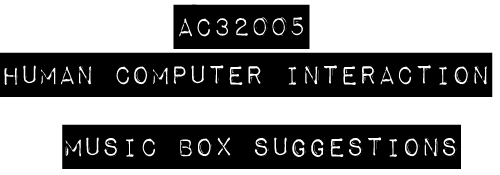
<style>
.page{position:relative;width:500px;height:175px;background:#ffffff}
.page>*{position:absolute;margin:0}
.t1{font:36px "ImpactLabel";letter-spacing:-0.075em;color:#000000}
</style>
<div class="page">
<p class="t1" style="left:173px;top:4px;width:137px;height:45px">AC32005</p>
<p class="t1" style="left:0px;top:52px;width:493px;height:45px">Human CoMputer Interaction</p>
<p class="t1" style="left:62px;top:124px;width:399px;height:45px">Music Box Suggestions</p>
</div>
